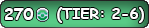
<style>
.page{position:relative;width:149px;height:28px}
.page>*{position:absolute;margin:0}
.t1{font:12px "ComicSansMS-Bold";color:#ffffff}
.t2{font:14.7px "ComicSansMS-Bold";color:#ffffff}
</style>
<div class="page">
<p class="t1" style="left:4px;top:8px;width:30px;height:12px">270</p>
<p class="t2" style="left:57px;top:7px;width:87px;height:16px">(TIER: 2-6)</p>
</div>
